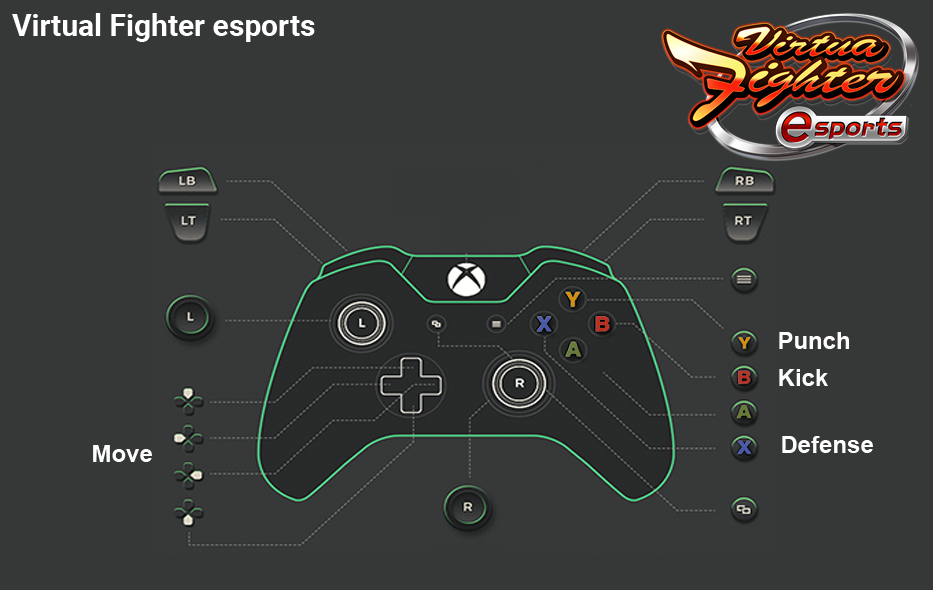
<style>
.page{position:relative;width:933px;height:590px;background:#363838}
.page>*{position:absolute;margin:0}
.t1{font:30px "Roboto-Bold";color:#ffffff}
.t2{font:24px "Arial-BoldMT";color:#fefefe}
</style>
<div class="page">
<p class="t1" style="left:12px;top:13px;width:303px;height:29px">Virtual Fighter esports</p>
<p class="t2" style="left:779px;top:332px;width:70px;height:17px">Punch</p>
<p class="t2" style="left:779px;top:369px;width:49px;height:17px">Kick</p>
<p class="t2" style="left:782px;top:436px;width:91px;height:17px">Defense</p>
<p class="t2" style="left:93px;top:445px;width:59px;height:17px">Move</p>
</div>
